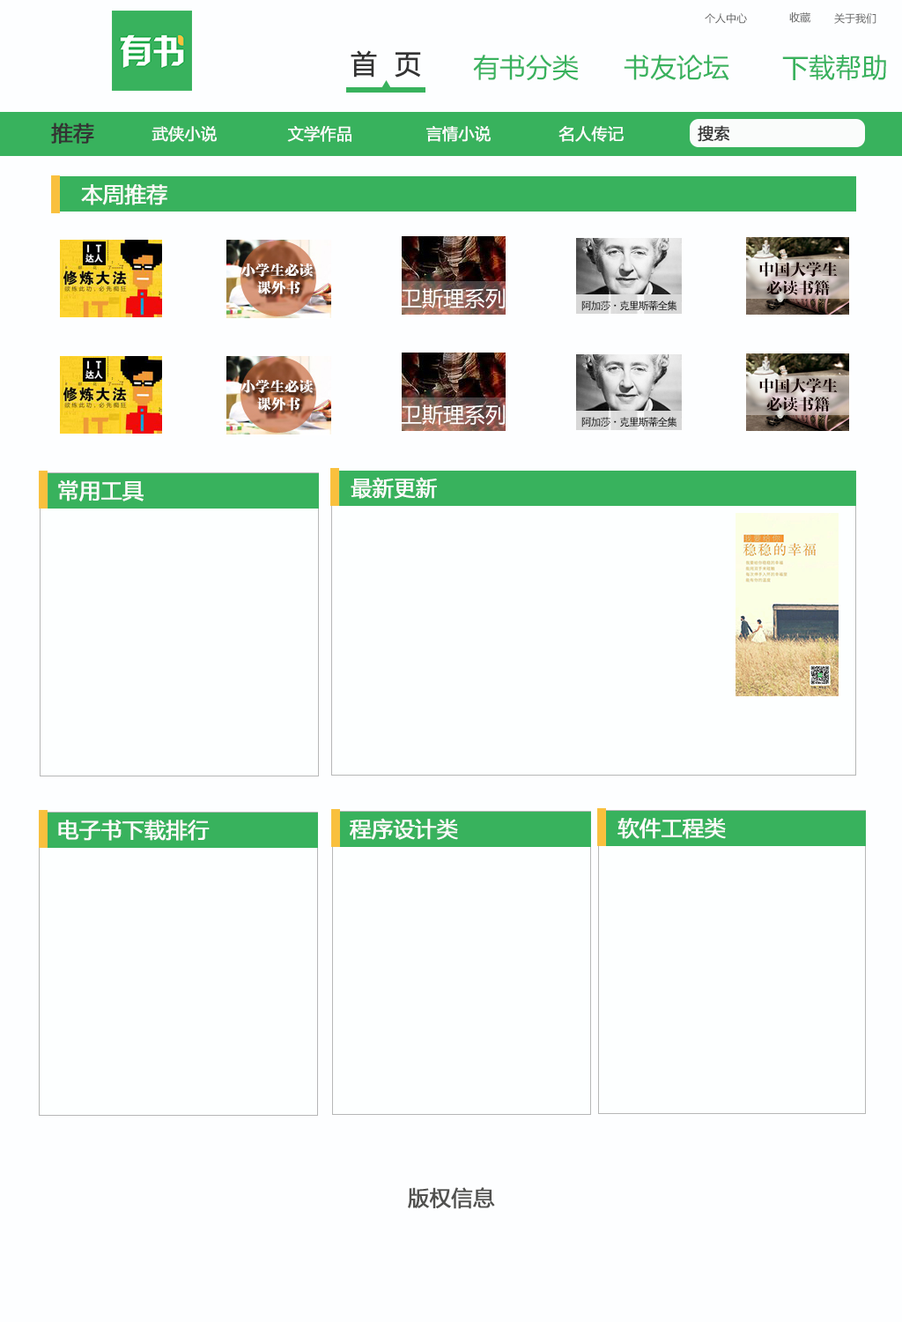
<style>
.page{position:relative;width:902px;height:1322px;background:#fdfeff}
.page>*{position:absolute;margin:0}
.t1{font:10.6px "MicrosoftYaHei";color:#666666}
.t2{font:26.4px "MicrosoftYaHei";color:#333333;font-weight:bold}
.t3{font:26.4px "MicrosoftYaHei";color:#38b25d}
.t4{font:21.1px "MicrosoftYaHei";color:#333333;font-weight:bold}
.t5{font:15.9px "MicrosoftYaHei";color:#fefdfd;font-weight:bold}
.t6{font:15.9px "MicrosoftYaHei";color:#333333;font-weight:bold}
.t7{font:21.1px "MicrosoftYaHei";color:#fcfbf8;font-weight:bold}
.t8{font:21.1px "MicrosoftYaHei";color:#fcfbfa;font-weight:bold}
.t9{font:21.1px "MicrosoftYaHei";color:#51514f;font-weight:bold}
</style>
<div class="page">
<p class="t1" style="left:705px;top:13px;width:42px;height:11px">个人中心</p>
<p class="t1" style="left:789px;top:12px;width:22px;height:11px">收藏</p>
<p class="t1" style="left:834px;top:13px;width:43px;height:11px">关于我们</p>
<p class="t2" style="left:351px;top:50px;width:70px;height:28px">首  页</p>
<p class="t3" style="left:473px;top:55px;width:106px;height:26px">有书分类</p>
<p class="t3" style="left:624px;top:55px;width:106px;height:25px">书友论坛</p>
<p class="t3" style="left:782px;top:55px;width:104px;height:25px">下载帮助</p>
<p class="t4" style="left:51px;top:122px;width:43px;height:22px">推荐</p>
<p class="t5" style="left:152px;top:126px;width:65px;height:16px">武侠小说</p>
<p class="t5" style="left:287px;top:126px;width:65px;height:16px">文学作品</p>
<p class="t5" style="left:426px;top:126px;width:65px;height:16px">言情小说</p>
<p class="t5" style="left:559px;top:126px;width:65px;height:16px">名人传记</p>
<p class="t6" style="left:698px;top:125px;width:32px;height:17px">搜索</p>
<p class="t7" style="left:81px;top:184px;width:86px;height:21px">本周推荐</p>
<p class="t8" style="left:58px;top:480px;width:86px;height:21px">常用工具</p>
<p class="t8" style="left:351px;top:477px;width:86px;height:22px">最新更新</p>
<p class="t8" style="left:58px;top:819px;width:152px;height:22px">电子书下载排行</p>
<p class="t8" style="left:350px;top:818px;width:108px;height:22px">程序设计类</p>
<p class="t8" style="left:618px;top:818px;width:108px;height:21px">软件工程类</p>
<p class="t9" style="left:408px;top:1187px;width:87px;height:22px">版权信息</p>
</div>
